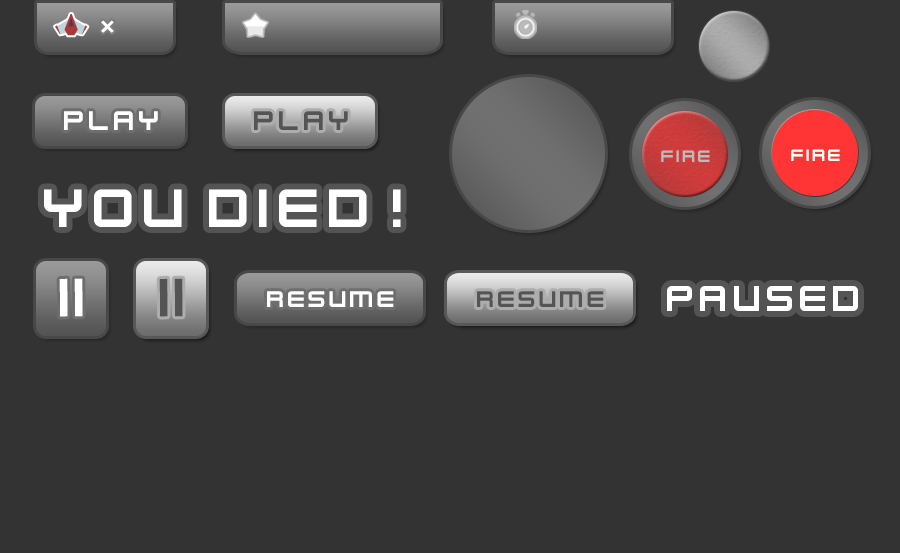
<style>
.page{position:relative;width:900px;height:553px;background:#333333}
.page>*{position:absolute;margin:0}
.t1{font:30px "KenVector-Future";color:#ffffff}
.t2{font:30px "KenVector-Future";color:#545454}
.t3{font:18.4px "KenVector-Future";color:#bbbbbb}
.t4{font:18.4px "KenVector-Future";color:#ffffff}
.t5{font:60px "KenVector-Future";color:#ffffff}
.t6{font:60px "KenVector-Future";color:#545454}
.t7{font:25px "KenVector-Future";color:#ffffff}
.t8{font:25px "KenVector-Future";color:#545454}
.t9{font:40px "KenVector-Future";color:#ffffff}
</style>
<div class="page">
<p class="t1" style="left:64px;top:111px;width:94px;height:19px">PLAY</p>
<p class="t2" style="left:254px;top:111px;width:94px;height:19px">PLAY</p>
<p class="t3" style="left:661px;top:150px;width:49px;height:12px">fire</p>
<p class="t4" style="left:791px;top:149px;width:49px;height:12px">fire</p>
<p class="t5" style="left:44px;top:189px;width:357px;height:38px">yOU dIED!</p>
<p class="t5" style="left:59px;top:278px;width:24px;height:39px;rotate:89deg">=</p>
<p class="t6" style="left:159px;top:278px;width:24px;height:39px;rotate:89deg">=</p>
<p class="t7" style="left:267px;top:291px;width:127px;height:16px">resume</p>
<p class="t8" style="left:477px;top:291px;width:127px;height:16px">resume</p>
<p class="t9" style="left:667px;top:286px;width:191px;height:25px">paused</p>
</div>
